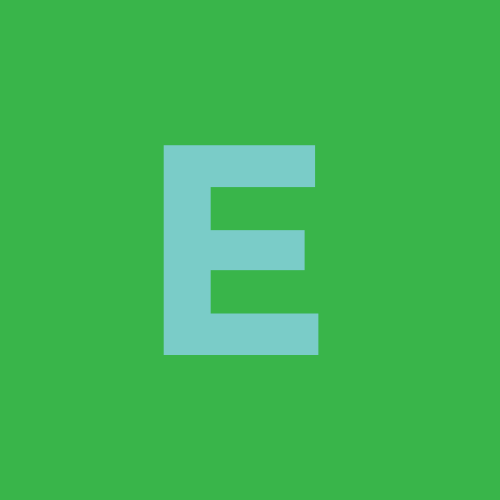
<style>
.page{position:relative;width:500px;height:500px;background:#39b54a}
.page>*{position:absolute;margin:0}
.t1{font:300px "Montserrat-Bold";color:#7accc8}
</style>
<div class="page">
<p class="t1" style="left:163px;top:145px;width:156px;height:210px">E</p>
</div>
